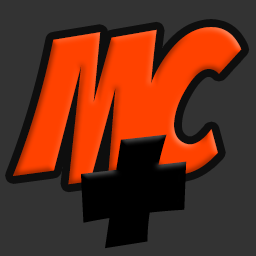
<style>
.page{position:relative;width:256px;height:256px;background:#333333}
.page>*{position:absolute;margin:0}
.t1{font:200px "BadaBoomBB";letter-spacing:-0.04em;color:#ff4200}
.t2{font:325px "BadaBoomBB";letter-spacing:-0.04em;color:#000000}
</style>
<div class="page">
<p class="t1" style="left:13px;top:27px;width:229px;height:158px">MC</p>
<p class="t2" style="left:81px;top:134px;width:106px;height:115px">+</p>
</div>
